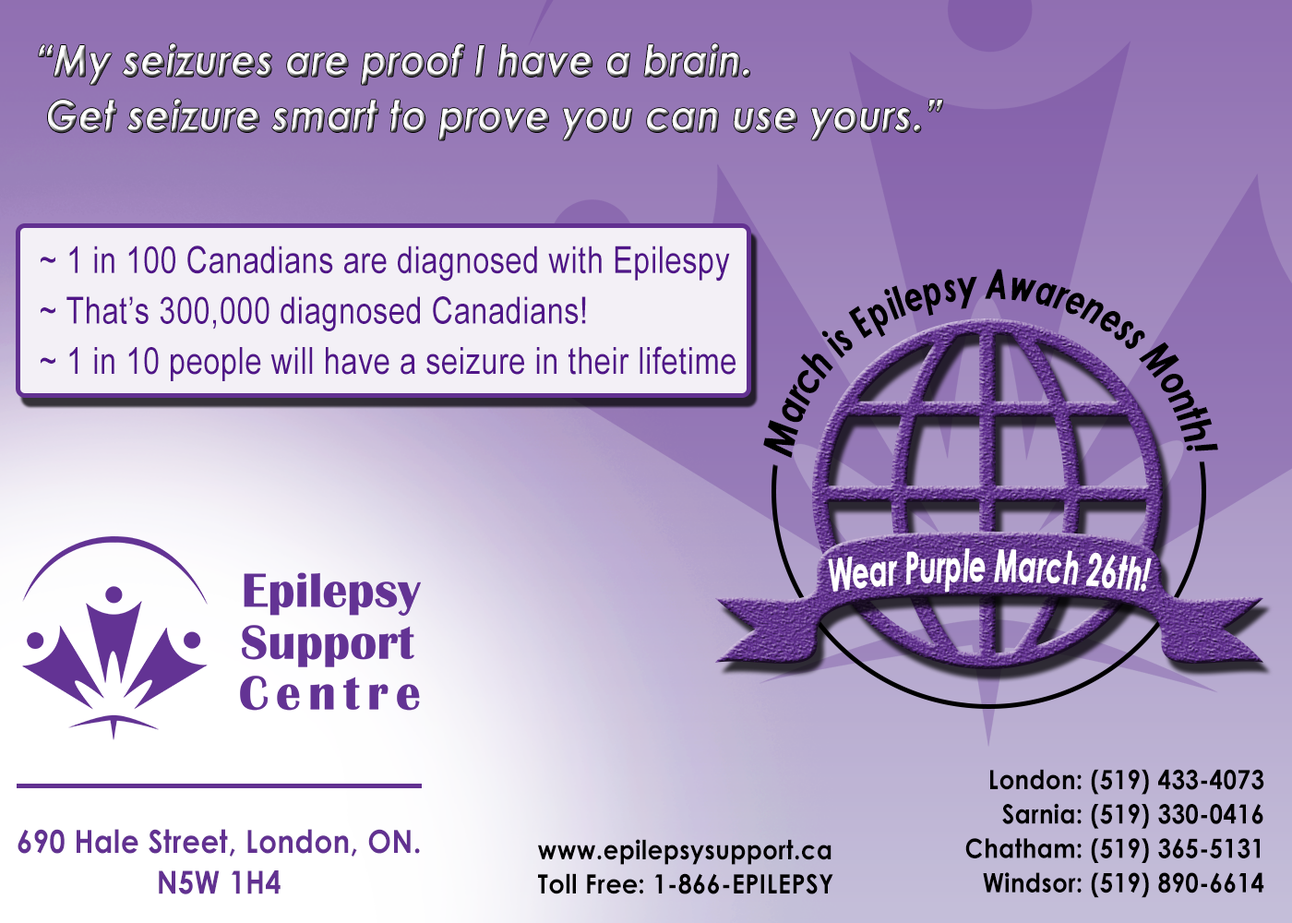
<style>
.page{position:relative;width:1292px;height:923px}
.page>*{position:absolute;margin:0}
.t1{font:42.9px "CenturyGothic-BoldItalic";letter-spacing:0.02em;scale:0.89 1}
.t2{font:37.4px "ArialMT";letter-spacing:0.02em;color:#501588;scale:0.8 1}
.t3{font:41.3px "CenturyGothic-BoldItalic";letter-spacing:0.02em;color:#000000;scale:0.45 1}
.t4{font:45.4px "CenturyGothic-BoldItalic";letter-spacing:0.02em;color:#ffffff;scale:0.57 1}
.t5{font:26.6px "CenturyGothic-Bold";letter-spacing:0.02em;color:#000000;scale:0.89 1}
.t6{font:31.8px "CenturyGothic-Bold";letter-spacing:0.02em;color:#623191;scale:0.89 1}
.t7{font:26.6px "CenturyGothic-Bold";letter-spacing:0.02em;color:#000000;scale:0.92 1}
</style>
<div class="page">
<p class="t1" style="left:39px;top:43px;width:904px;height:97px">“My seizures are proof I have a brain. <br>     Get seizure smart to prove you can use yours.”</p>
<p class="t2" style="left:41px;top:245px;width:695px;height:136px">~ 1 in 100 Canadians are diagnosed with Epilespy<br>~ That’s 300,000 diagnosed Canadians!<br>~ 1 in 10 people will have a seizure in their lifetime</p>
<p class="t3" style="left:763px;top:269px;width:455px;height:189px">March is Epilepsy Awareness Month!</p>
<p class="t4" style="left:828px;top:548px;width:324px;height:44px">Wear Purple March 26th!</p>
<p class="t5" style="left:965px;top:769px;width:299px;height:129px;text-align:right">London: (519) 433-4073<br>Sarnia: (519) 330-0416<br>Chatham: (519) 365-5131<br>Windsor: (519) 890-6614</p>
<p class="t6" style="left:18px;top:829px;width:402px;height:65px;text-align:center">690 Hale Street, London, ON.<br>N5W 1H4</p>
<p class="t7" style="left:538px;top:839px;width:295px;height:55px"><span class="t5">www.epilepsysupport.ca<br></span>Toll Free: 1-866-EPILEPSY</p>
</div>
